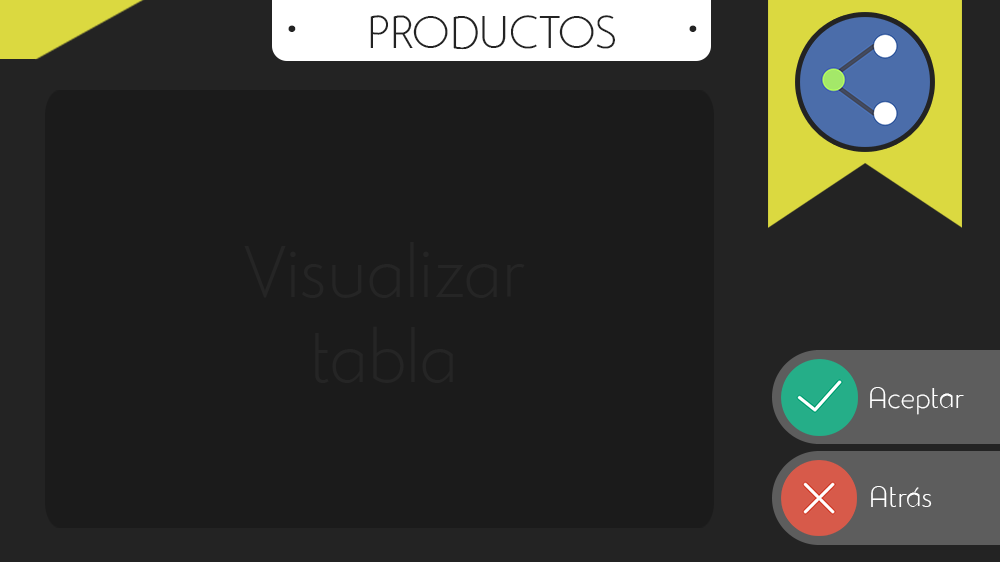
<style>
.page{position:relative;width:1000px;height:562px;background:#1b1b1b}
.page>*{position:absolute;margin:0}
.t1{font:45px "StudioGothicAlternateTrial-Extr";color:#232323}
.t2{font:97px "StudioGothicAlternateTrial-Extr";color:#232323}
.t3{font:71px "StudioGothicAlternateTrial-Extr";color:#252525}
.t4{font:29px "StudioGothicAlternateTrial-Extr";color:#ffffff}
</style>
<div class="page">
<p class="t1" style="left:370px;top:15px;width:245px;height:35px">PRODUCTOS</p>
<p class="t2" style="left:288px;top:25px;width:409px;height:7px">·                 ·</p>
<p class="t3" style="left:244px;top:242px;width:281px;height:141px;text-align:center">Visualizar<br>tabla</p>
<p class="t4" style="left:870px;top:387px;width:94px;height:28px">Aceptar</p>
<p class="t4" style="left:871px;top:486px;width:61px;height:21px">Atrás</p>
</div>
